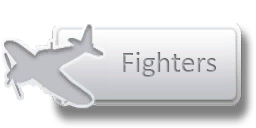
<style>
.page{position:relative;width:256px;height:128px;background:#ffffff}
.page>*{position:absolute;margin:0}
.t1{font:30px "Calibri"}
</style>
<div class="page">
<p class="t1" style="left:123px;top:52px;width:93px;height:25px">Fighters</p>
</div>
